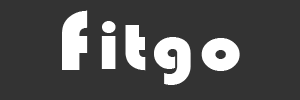
<style>
.page{position:relative;width:300px;height:100px;background:#333333}
.page>*{position:absolute;margin:0}
.t1{font:87.7px "Bauhaus93";color:#ffffff;scale:1.08 1}
.t2{font:87.7px "Verdana-Bold";color:#ffffff;scale:1.08 1}
.t3{font:68.2px "Bauhaus93";color:#ffffff;scale:1.08 1}
</style>
<div class="page">
<p class="t1" style="left:62px;top:10px;width:26px;height:60px"><span class="t2"> </span>f</p>
<p class="t3" style="left:101px;top:21px;width:15px;height:48px">i</p>
<p class="t3" style="left:125px;top:25px;width:21px;height:46px">t</p>
<p class="t3" style="left:154px;top:37px;width:37px;height:48px">g</p>
<p class="t3" style="left:201px;top:38px;width:39px;height:33px">o</p>
</div>
